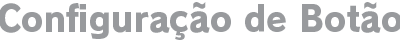
<style>
.page{position:relative;width:400px;height:40px;background:#ffffff}
.page>*{position:absolute;margin:0}
.t1{font:36px "RodinPro-EB";letter-spacing:0.003em;color:#989a9d;scale:0.93 1}
</style>
<div class="page">
<p class="t1" style="left:0px;top:2px;width:402px;height:38px">Configuração de Botão</p>
</div>
